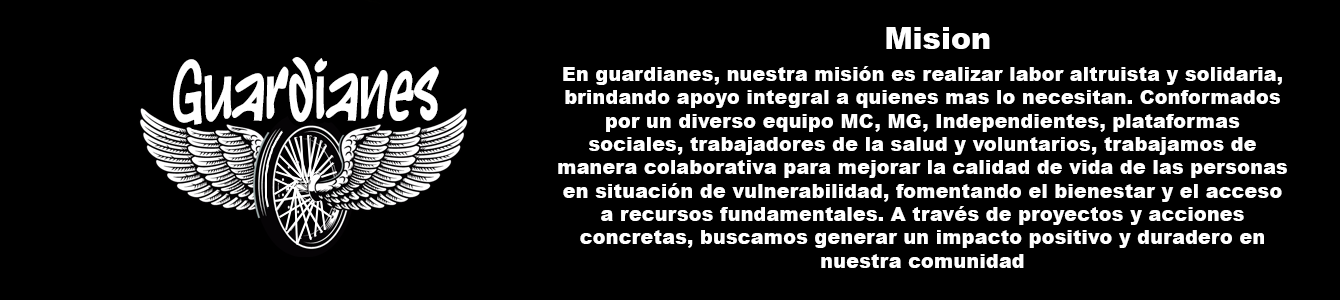
<style>
.page{position:relative;width:1340px;height:300px;background:#000000}
.page>*{position:absolute;margin:0}
.t1{font:30px "Arial-Black";color:#ffffff}
.t2{font:19.4px "Arial-Black";color:#ffffff}
</style>
<div class="page">
<p class="t1" style="left:886px;top:27px;width:104px;height:22px">Mision</p>
<p class="t2" style="left:558px;top:66px;width:729px;height:202px;text-align:center">En guardianes, nuestra misión es realizar labor altruista y solidaria, brindando apoyo integral a quienes mas lo necesitan. Conformados por un diverso equipo MC, MG, Independientes, plataformas sociales, trabajadores de la salud y voluntarios, trabajamos de manera colaborativa para mejorar la calidad de vida de las personas en situación de vulnerabilidad, fomentando el bienestar y el acceso a recursos fundamentales. A través de proyectos y acciones concretas, buscamos generar un impacto positivo y duradero en nuestra comunidad</p>
</div>
